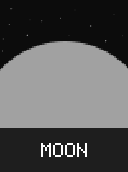
<style>
.page{position:relative;width:128px;height:172px;background:#a1a1a1}
.page>*{position:absolute;margin:0}
.t1{font:16px "pixelmix";color:#ffffff}
</style>
<div class="page">
<p class="t1" style="left:41px;top:143px;width:46px;height:14px">MOON</p>
</div>
